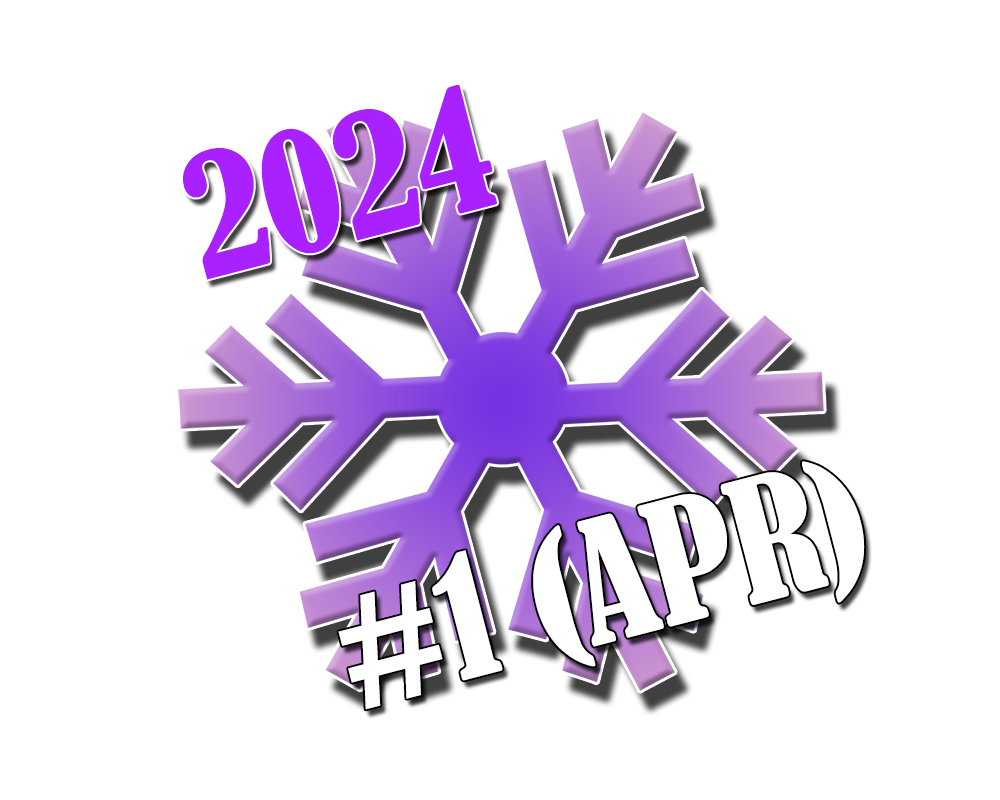
<style>
.page{position:relative;width:1000px;height:800px;background:#ffffff}
.page>*{position:absolute;margin:0}
.t1{font:158.2px "BernardMT-Condensed";color:#aa21ff}
.t2{font:158.2px "BernardMT-Condensed";color:#ffffff}
</style>
<div class="page">
<p class="t1" style="left:183px;top:84px;width:314px;height:196px;rotate:-15deg">2024</p>
<p class="t2" style="left:338px;top:461px;width:527px;height:249px;rotate:-15deg">#1 (APR)</p>
</div>
